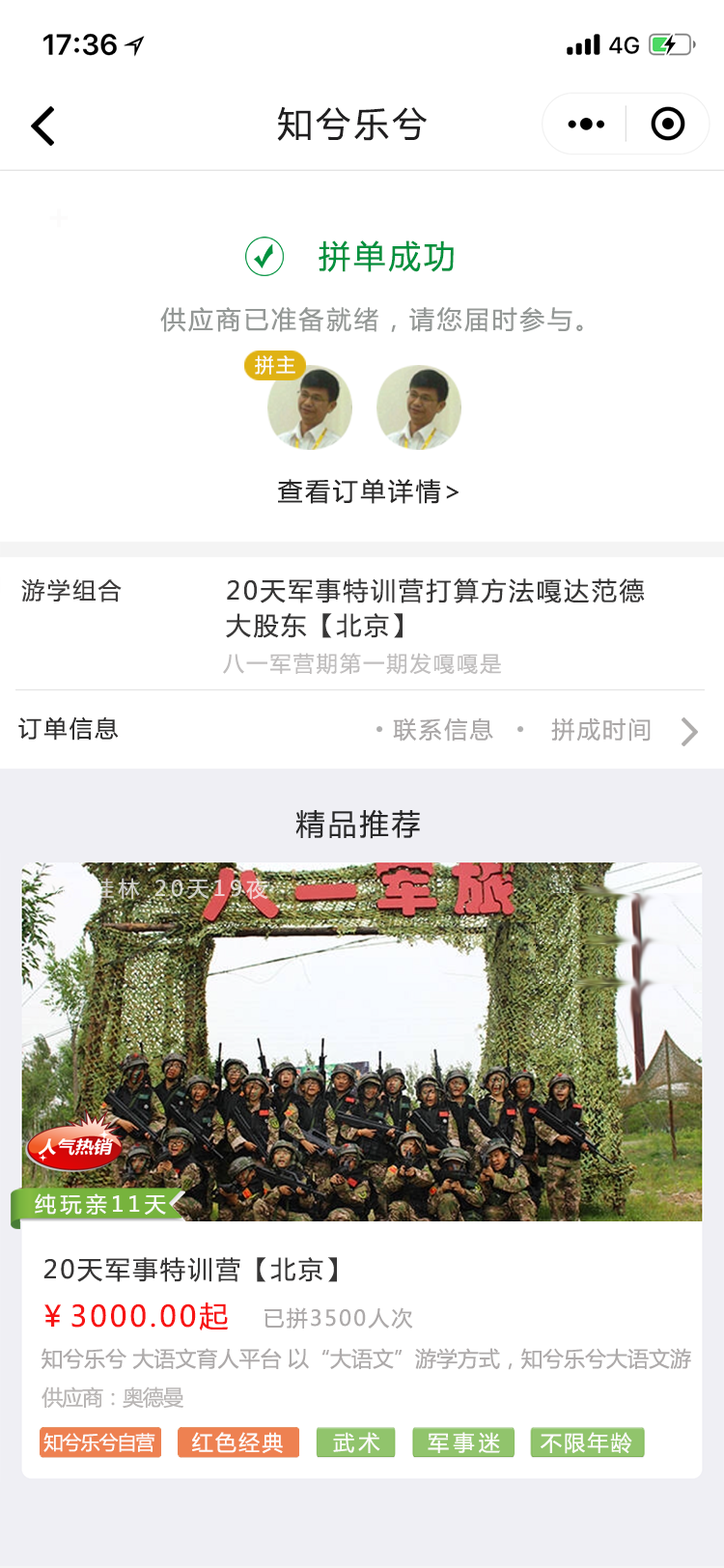
<style>
.page{position:relative;width:724px;height:1568px;background:#ffffff}
.page>*{position:absolute;margin:0}
.t1{font:34.8px "MicrosoftYaHei";letter-spacing:0.1em;color:#201f20}
.t2{font:31.9px "MicrosoftYaHei";letter-spacing:0.1em;color:#00913e}
.t3{font:25.1px "MicrosoftYaHei";letter-spacing:0.1em;color:#949896}
.t4{font:19.3px "MicrosoftYaHei";letter-spacing:0.1em;color:#fcfbf8}
.t5{font:25.1px "MicrosoftYaHei";letter-spacing:0.1em;color:#292828}
.t6{font:23.2px "MicrosoftYaHei";letter-spacing:0.1em;color:#3d3b3b}
.t7{font:25.1px/34.8px "MicrosoftYaHei";letter-spacing:0.1em;color:#373636}
.t8{font:21.2px "MicrosoftYaHei";letter-spacing:0.1em;color:#c0bebe}
.t9{font:23.2px "MicrosoftYaHei";letter-spacing:0.1em;color:#2f2e2e}
.t10{font:23.2px "MicrosoftYaHei";letter-spacing:0.1em;color:#9c9999}
.t11{font:46.3px "MicrosoftYaHei";letter-spacing:0.1em;color:#b0b0b0}
.t12{font:29px "MicrosoftYaHei";letter-spacing:0.1em;color:#282829}
</style>
<div class="page">
<p class="t1" style="left:277px;top:106px;width:150px;height:35px">知兮乐兮</p>
<p class="t2" style="left:319px;top:240px;width:135px;height:32px">拼单成功</p>
<p class="t3" style="left:160px;top:307px;width:423px;height:25px">供应商已准备就绪，请您届时参与。</p>
<p class="t4" style="left:255px;top:355px;width:40px;height:20px">拼主</p>
<p class="t5" style="left:277px;top:479px;width:182px;height:25px">查看订单详情&gt;</p>
<p class="t6" style="left:21px;top:578px;width:101px;height:24px">游学组合</p>
<p class="t7" style="left:226px;top:578px;width:419px;height:60px">20天军事特训营打算方法嘎达范德<br>大股东【北京】</p>
<p class="t8" style="left:223px;top:653px;width:279px;height:22px">八一军营期第一期发嘎嘎是</p>
<p class="t9" style="left:18px;top:716px;width:101px;height:25px">订单信息</p>
<p class="t10" style="left:393px;top:717px;width:100px;height:25px;opacity:0.88">联系信息</p>
<p class="t10" style="left:551px;top:718px;width:100px;height:24px;opacity:0.88">拼成时间</p>
<p class="t11" style="left:377px;top:726px;width:6px;height:7px">·</p>
<p class="t11" style="left:518px;top:726px;width:6px;height:7px">·</p>
<p class="t12" style="left:295px;top:809px;width:125px;height:30px">精品推荐</p>
</div>
